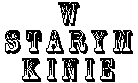
<style>
.page{position:relative;width:138px;height:83px;background:#ffffff}
.page>*{position:absolute;margin:0}
.t1{font:32.4px/28px "RosewoodStd-Regular";letter-spacing:0.2em;color:#000000;scale:0.89 1}
</style>
<div class="page">
<p class="t1" style="left:5px;top:2px;width:128px;height:80px;text-align:center">W<br>Starym<br>Kinie</p>
</div>
